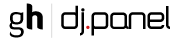
<style>
.page{position:relative;width:180px;height:40px;background:#ffffff}
.page>*{position:absolute;margin:0}
.t1{font:33.3px "DiavloBook-Regular";color:#000000}
.t2{font:33.3px "DiavloBlack-Regular";color:#000000}
.t3{font:33.3px "SquareTypeB";color:#000000}
.t4{font:33.3px "SquareTypeB";color:#ce1b1b}
</style>
<div class="page">
<p class="t1" style="left:9px;top:3px;width:34px;height:35px">g<span class="t2">h</span></p>
<p class="t3" style="left:61px;top:5px;width:109px;height:31px">dj<span class="t4">.</span>panel</p>
</div>
